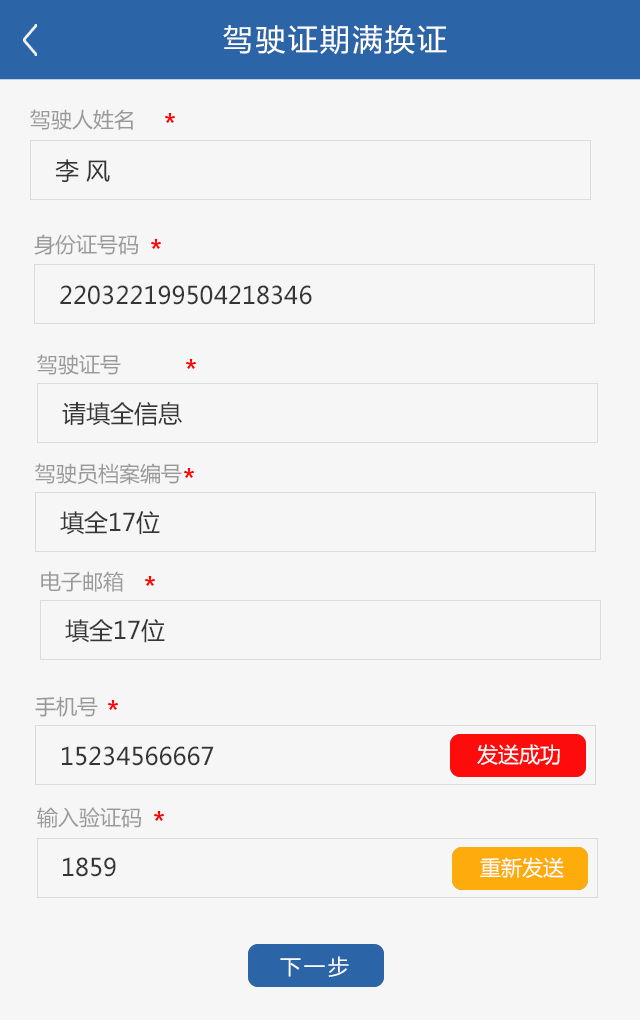
<style>
.page{position:relative;width:640px;height:1020px;background:#f6f6f6}
.page>*{position:absolute;margin:0}
.t1{font:30px "MicrosoftYaHei";letter-spacing:0.08em;color:#ffffff}
.t2{font:21px "MicrosoftYaHei";color:#999999}
.t3{font:24px "MicrosoftYaHei";color:#353535}
.t4{font:21px "MicrosoftYaHei";color:#ffffff}
.t5{font:21px "MicrosoftYaHei";letter-spacing:0.14em;color:#ffffff}
</style>
<div class="page">
<p class="t1" style="left:223px;top:25px;width:224px;height:30px">驾驶证期满换证</p>
<p class="t2" style="left:30px;top:109px;width:103px;height:21px">驾驶人姓名</p>
<p class="t3" style="left:55px;top:159px;width:55px;height:23px">李 风</p>
<p class="t2" style="left:34px;top:234px;width:104px;height:21px">身份证号码</p>
<p class="t3" style="left:60px;top:285px;width:252px;height:20px">220322199504218346</p>
<p class="t2" style="left:37px;top:354px;width:84px;height:21px">驾驶证号</p>
<p class="t3" style="left:62px;top:401px;width:120px;height:25px">请填全信息</p>
<p class="t2" style="left:35px;top:463px;width:147px;height:21px">驾驶员档案编号</p>
<p class="t3" style="left:60px;top:511px;width:100px;height:24px">填全17位</p>
<p class="t2" style="left:41px;top:571px;width:83px;height:21px">电子邮箱</p>
<p class="t3" style="left:65px;top:619px;width:100px;height:24px">填全17位</p>
<p class="t2" style="left:35px;top:696px;width:63px;height:21px">手机号</p>
<p class="t3" style="left:62px;top:746px;width:152px;height:20px">15234566667</p>
<p class="t4" style="left:477px;top:744px;width:83px;height:21px">发送成功</p>
<p class="t2" style="left:37px;top:807px;width:104px;height:21px">输入验证码</p>
<p class="t3" style="left:63px;top:857px;width:53px;height:20px">1859</p>
<p class="t4" style="left:480px;top:857px;width:84px;height:21px">重新发送</p>
<p class="t5" style="left:280px;top:956px;width:69px;height:21px">下一步</p>
</div>
